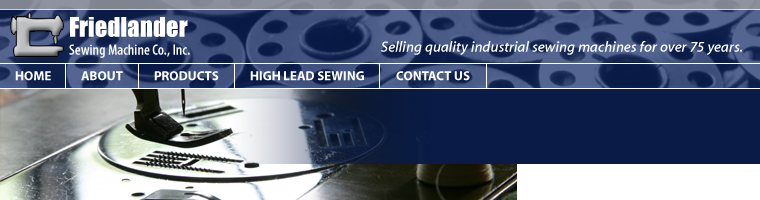
<style>
.page{position:relative;width:760px;height:200px}
.page>*{position:absolute;margin:0}
.t1{font:15px "MyriadPro-SemiboldCond";color:#ffffff}
.t2{font:25px "Impact";color:#ffffff}
.t3{font:15.1px "MyriadSet-SemiboldItalic";color:#ffffff}
.t4{font:13.1px "MyriadPro-Bold";color:#ffffff}
</style>
<div class="page">
<p class="t1" style="left:69px;top:17px;width:121px;height:41px"><span class="t2">Friedlander <br></span>Sewing Machine Co., Inc.</p>
<p class="t3" style="left:381px;top:41px;width:361px;height:14px">Selling quality industrial sewing machines for over 75 years.</p>
<p class="t4" style="left:15px;top:71px;width:36px;height:10px">HOME</p>
<p class="t4" style="left:81px;top:71px;width:42px;height:10px">ABOUT</p>
<p class="t4" style="left:154px;top:71px;width:65px;height:10px">PRODUCTS</p>
<p class="t4" style="left:250px;top:71px;width:114px;height:10px">HIGH LEAD SEWING</p>
<p class="t4" style="left:396px;top:71px;width:74px;height:10px">CONTACT US</p>
</div>
